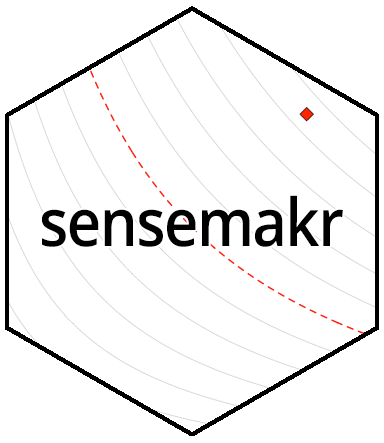
<style>
.page{position:relative;width:384px;height:443px;background:#ffffff}
.page>*{position:absolute;margin:0}
.t1{font:66px "OpenSans-Semibold";letter-spacing:-0.01em;color:#000000;scale:0.91 1}
</style>
<div class="page">
<p class="t1" style="left:42px;top:195px;width:301px;height:52px">sensemakr</p>
</div>
